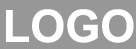
<style>
.page{position:relative;width:136px;height:49px;background:#989797}
.page>*{position:absolute;margin:0}
.t1{font:45px "Arial-BoldMT";color:#ffffff}
</style>
<div class="page">
<p class="t1" style="left:6px;top:9px;width:128px;height:34px">LOGO</p>
</div>
